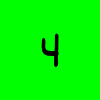
<style>
.page{position:relative;width:100px;height:100px;background:#00ff00}
.page>*{position:absolute;margin:0}
.t1{font:48.6px "Dekko";color:#000000}
</style>
<div class="page">
<p class="t1" style="left:41px;top:33px;width:18px;height:34px">4</p>
</div>
